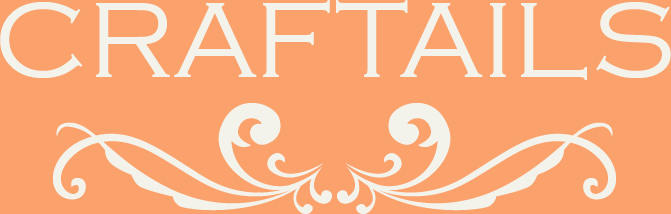
<style>
.page{position:relative;width:671px;height:214px;background:#fba16c}
.page>*{position:absolute;margin:0}
.t1{font:111px "CopperplateGothic-Light";color:#f3f3eb}
</style>
<div class="page">
<p class="t1" style="left:0px;top:0px;width:671px;height:80px">CRAFTAILS</p>
</div>
